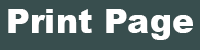
<style>
.page{position:relative;width:200px;height:50px;background:#384e4e}
.page>*{position:absolute;margin:0}
.t1{font:33.1px "Arial-Black";letter-spacing:0.005em;color:#ffffff}
</style>
<div class="page">
<p class="t1" style="left:8px;top:9px;width:185px;height:31px">Print Page</p>
</div>
